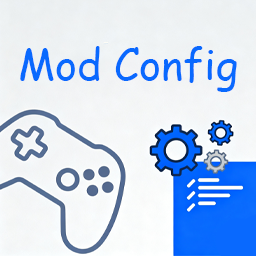
<style>
.page{position:relative;width:256px;height:256px}
.page>*{position:absolute;margin:0}
.t1{font:41.7px "ComicSansMS";color:#0969fe}
</style>
<div class="page">
<p class="t1" style="left:20px;top:46px;width:217px;height:46px">Mod Config</p>
</div>
